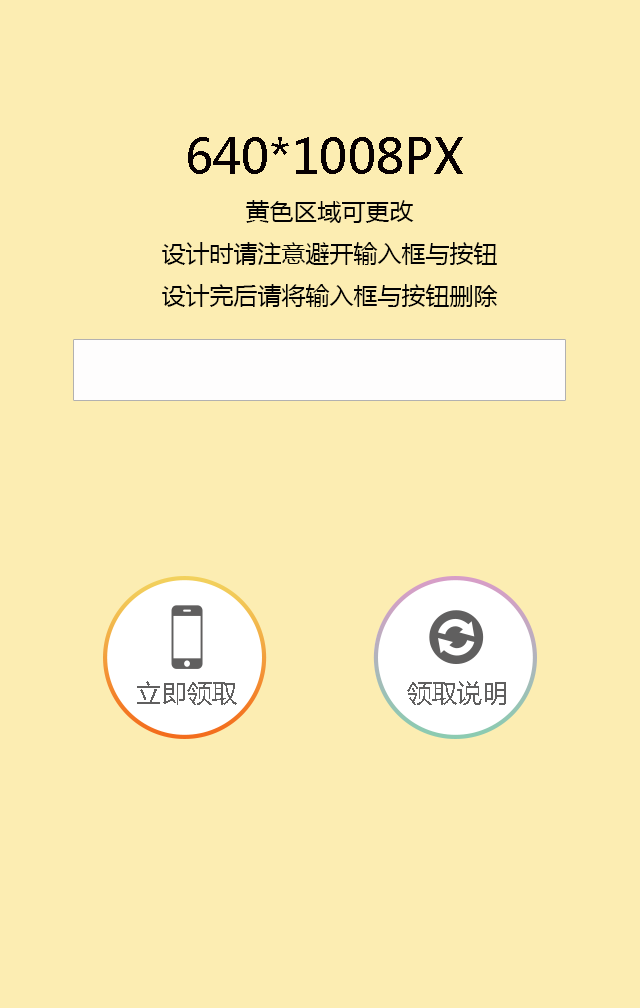
<style>
.page{position:relative;width:640px;height:1008px;background:#fcedb2}
.page>*{position:absolute;margin:0}
.t1{font:48px "MicrosoftYaHei";color:#070002}
.t2{font:24px "MicrosoftYaHei";color:#020202}
.t3{font:25px "MicrosoftYaHei";color:#605f5f}
</style>
<div class="page">
<p class="t1" style="left:188px;top:137px;width:275px;height:37px">640*1008PX</p>
<p class="t2" style="left:162px;top:200px;width:336px;height:107px;text-align:center">黄色区域可更改<br>设计时请注意避开输入框与按钮<br>设计完后请将输入框与按钮删除</p>
<p class="t3" style="left:137px;top:681px;width:100px;height:24px">立即领取</p>
<p class="t3" style="left:407px;top:681px;width:99px;height:24px">领取说明</p>
</div>
